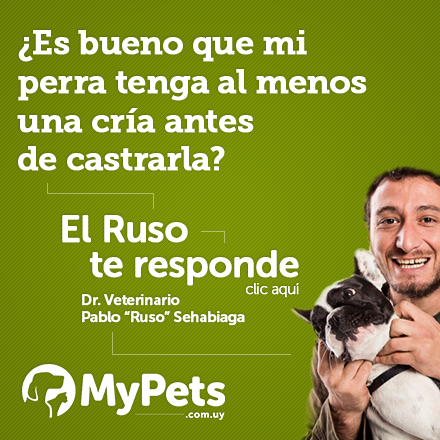
<style>
.page{position:relative;width:440px;height:440px}
.page>*{position:absolute;margin:0}
.t1{font:33.3px/38.7px "MuseoSlab-700";letter-spacing:-0.02em;color:#ffffff;font-weight:bold}
.t2{font:38px/35px "MuseoSansRounded-700";letter-spacing:-0.02em;color:#ffffff;font-weight:bold}
.t3{font:14.9px/17.3px "MuseoSansRounded-700";letter-spacing:-0.02em;color:#ffffff;font-weight:bold}
.t4{font:14.9px "MuseoSansRounded-100";letter-spacing:-0.02em;color:#ffffff;font-weight:bold}
</style>
<div class="page">
<p class="t1" style="left:17px;top:30px;width:350px;height:141px">¿Es bueno que mi <br>perra tenga al menos<br>una cría antes<br>de castrarla?</p>
<p class="t2" style="left:62px;top:215px;width:237px;height:71px">El Ruso<br>   te responde</p>
<p class="t3" style="left:82px;top:294px;width:163px;height:32px">Dr. Veterinario<br>Pablo “Ruso” Sehabiaga</p>
<p class="t4" style="left:245px;top:283px;width:54px;height:15px">clic aquí</p>
</div>
